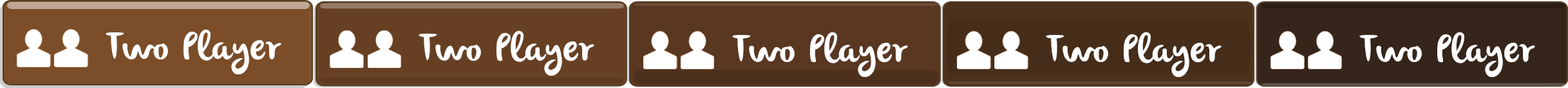
<style>
.page{position:relative;width:1568px;height:88px}
.page>*{position:absolute;margin:0}
.t1{font:39.2px "olivier";letter-spacing:0.02em;color:#ffffff}
</style>
<div class="page">
<p class="t1" style="left:106px;top:29px;width:175px;height:45px">Two Player</p>
<p class="t1" style="left:419px;top:30px;width:175px;height:45px">Two Player</p>
<p class="t1" style="left:732px;top:32px;width:176px;height:45px">Two Player</p>
<p class="t1" style="left:1046px;top:32px;width:176px;height:45px">Two Player</p>
<p class="t1" style="left:1359px;top:32px;width:176px;height:45px">Two Player</p>
</div>
